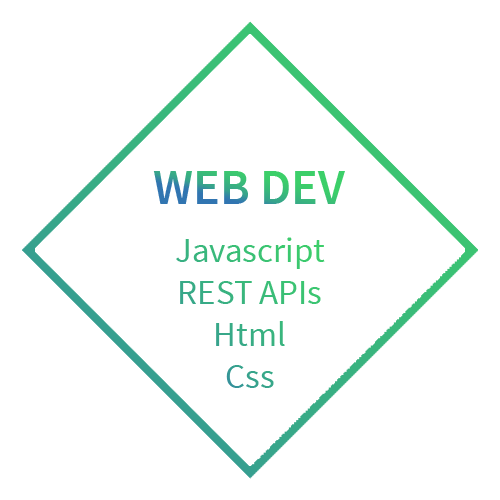
<style>
.page{position:relative;width:500px;height:500px;background:#ffffff}
.page>*{position:absolute;margin:0}
.t1{font:50px "SourceSansPro-SemiBold"}
.t2{font:35px "SourceSansPro-Regular";color:#39b67d}
</style>
<div class="page">
<p class="t1" style="left:153px;top:171px;width:192px;height:33px">WEB DEV</p>
<p class="t2" style="left:176px;top:237px;width:149px;height:151px;text-align:center">Javascript<br>REST APIs<br>Html<br>Css</p>
</div>
